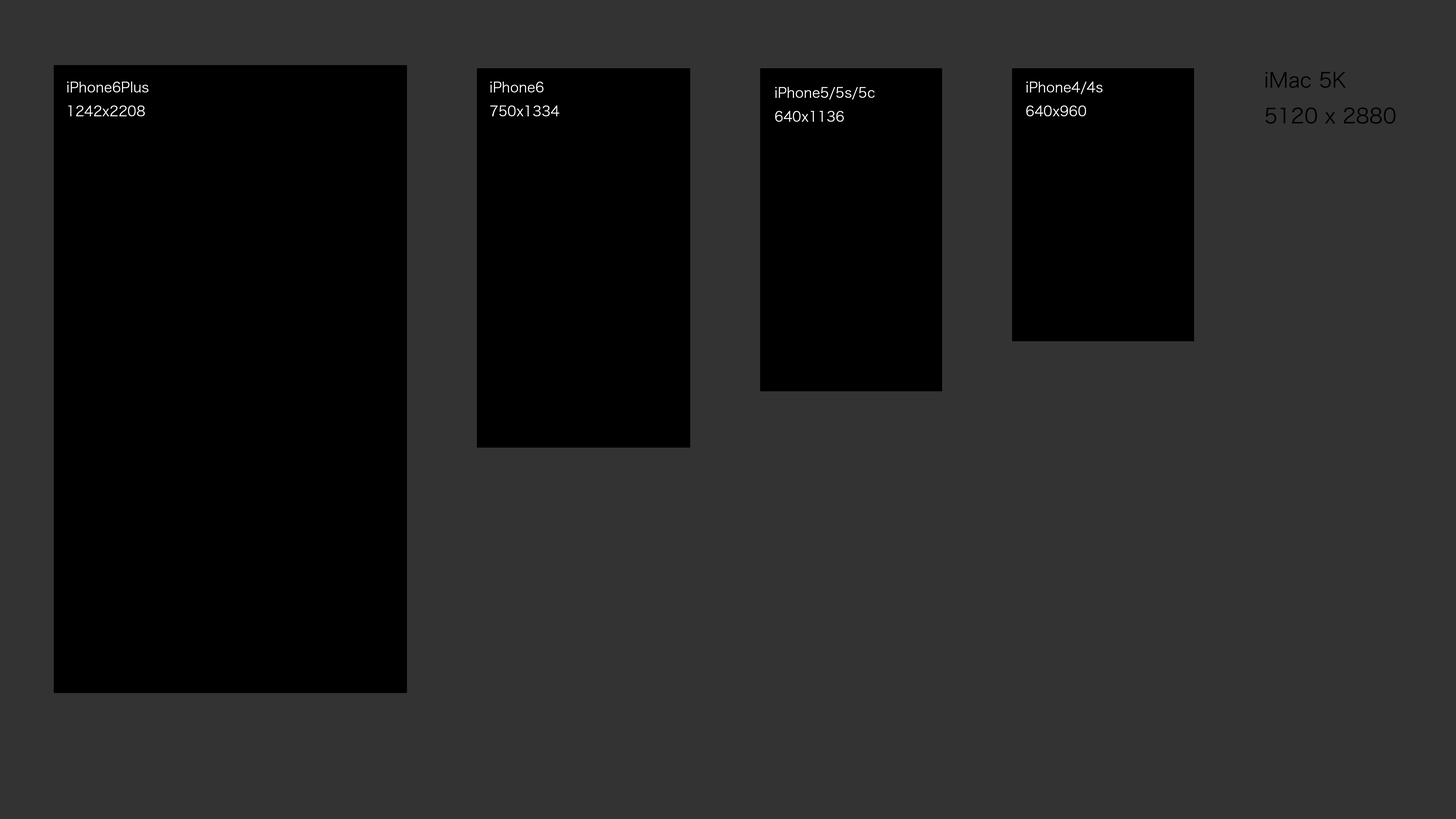
<style>
.page{position:relative;width:1456px;height:819px;background:#333333}
.page>*{position:absolute;margin:0}
.t1{font:20.5px "HiraKakuProN-W3";color:#000000}
.t2{font:13.6px "HiraKakuProN-W3";color:#ffffff}
</style>
<div class="page">
<p class="t1" style="left:1265px;top:72px;width:130px;height:52px">iMac 5K<br>5120 x 2880</p>
<p class="t2" style="left:67px;top:82px;width:81px;height:35px">iPhone6Plus<br>1242x2208</p>
<p class="t2" style="left:490px;top:82px;width:69px;height:34px">iPhone6<br>750x1334</p>
<p class="t2" style="left:775px;top:87px;width:100px;height:35px">iPhone5/5s/5c<br>640x1136</p>
<p class="t2" style="left:1026px;top:82px;width:77px;height:34px">iPhone4/4s<br>640x960</p>
</div>
